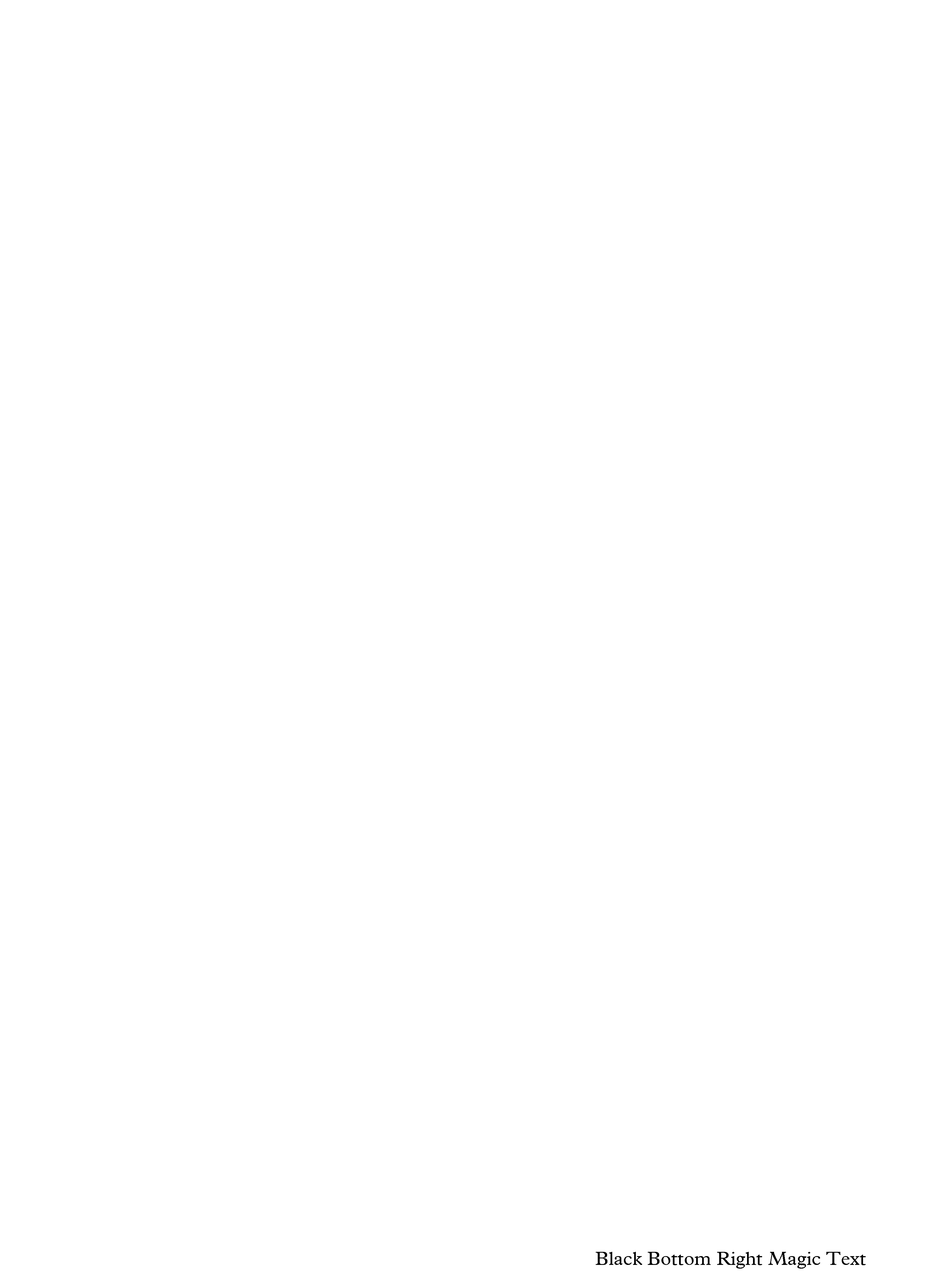
<style>
.page{position:relative;width:935px;height:1276px;background:#ffffff}
.page>*{position:absolute;margin:0}
.t1{font:19.3px "MPlantin";color:#000000}
</style>
<div class="page">
<p class="t1" style="left:596px;top:1252px;width:269px;height:16px">Black Bottom Right Magic Text</p>
</div>
